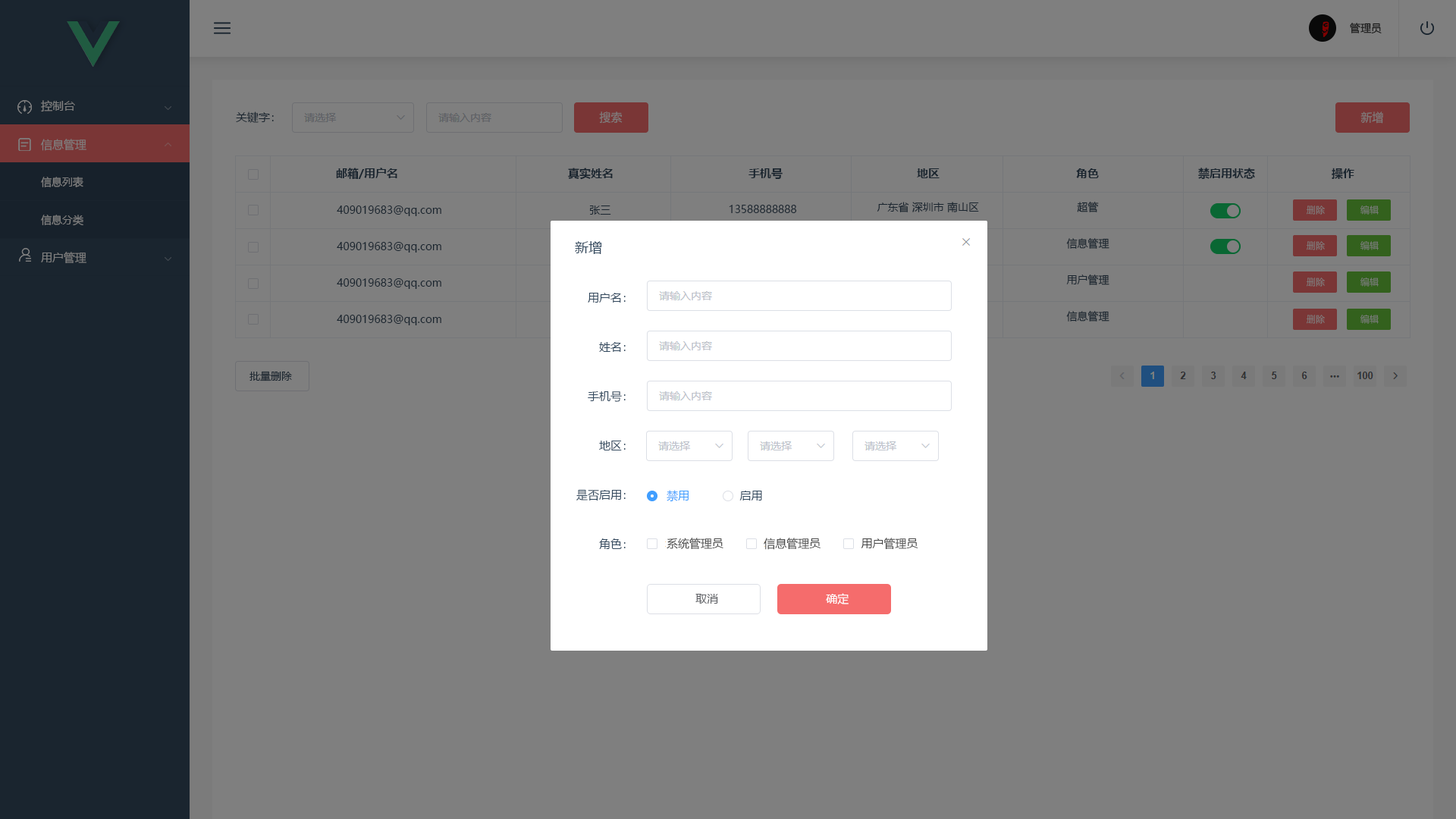
<style>
.page{position:relative;width:1456px;height:819px;background:#7f7f7f}
.page>*{position:absolute;margin:0}
.t1{font:10.6px "MicrosoftYaHei";color:#252525}
.t2{font:11.4px "MicrosoftYaHei";color:#7f7f7f}
.t3{font:11.4px "MicrosoftYaHei";color:#1a252f}
.t4{font:10.6px/37.9px "MicrosoftYaHei";color:#7f7f7f}
.t5{font:11.4px/37.9px "MicrosoftYaHei";color:#7f7f7f}
.t6{font:11.4px "MicrosoftYaHei-Bold";color:#1a252f}
.t7{font:10.6px/36.4px "MicrosoftYaHei";color:#1a252f}
.t8{font:9.1px "MicrosoftYaHei"}
.t9{font:13.6px "MicrosoftYaHei";color:#344a5f}
.t10{font:11.4px/49.3px "MicrosoftYaHei";color:#344a5f}
.t11{font:10.6px "MicrosoftYaHei";color:#1a252f}
.t12{font:11.4px "MicrosoftYaHei";color:#429fff}
.t13{font:11.4px "MicrosoftYaHei";color:#344a5f}
.t14{font:11.4px "MicrosoftYaHei";color:#484848}
.t15{font:11.4px "MicrosoftYaHei";color:#606266}
.t16{font:11.4px "MicrosoftYaHei";color:#ffffff}
</style>
<div class="page">
<p class="t1" style="left:1350px;top:23px;width:32px;height:11px">管理员</p>
<p class="t2" style="left:41px;top:100px;width:34px;height:12px">控制台</p>
<p class="t3" style="left:236px;top:111px;width:38px;height:12px">关键字：</p>
<p class="t2" style="left:599px;top:111px;width:24px;height:13px">搜索</p>
<p class="t2" style="left:1360px;top:111px;width:23px;height:13px">新增</p>
<p class="t4" style="left:41px;top:139px;width:45px;height:87px"><span class="t5">信息管理<br></span>信息列表<br>信息分类</p>
<p class="t6" style="left:336px;top:168px;width:61px;height:11px">邮箱/用户名</p>
<p class="t6" style="left:568px;top:168px;width:45px;height:12px">真实姓名</p>
<p class="t6" style="left:748px;top:168px;width:35px;height:11px">手机号</p>
<p class="t6" style="left:917px;top:168px;width:23px;height:10px">地区</p>
<p class="t6" style="left:1076px;top:168px;width:23px;height:10px">角色</p>
<p class="t6" style="left:1198px;top:168px;width:57px;height:11px">禁启用状态</p>
<p class="t6" style="left:1332px;top:168px;width:22px;height:11px">操作</p>
<p class="t7" style="left:337px;top:206px;width:104px;height:119px;text-align:center">409019683@qq.com<br>409019683@qq.com<br>409019683@qq.com<br>409019683@qq.com</p>
<p class="t7" style="left:1066px;top:202px;width:43px;height:120px;text-align:center">超管<br>信息管理<br>用户管理<br>信息管理</p>
<p class="t8" style="left:1307px;top:206px;width:18px;height:9px">删除</p>
<p class="t8" style="left:1360px;top:206px;width:19px;height:9px">编辑</p>
<p class="t9" style="left:575px;top:241px;width:27px;height:13px">新增</p>
<p class="t8" style="left:1307px;top:241px;width:18px;height:9px">删除</p>
<p class="t8" style="left:1360px;top:241px;width:19px;height:9px">编辑</p>
<p class="t2" style="left:41px;top:252px;width:45px;height:11px">用户管理</p>
<p class="t8" style="left:1307px;top:278px;width:18px;height:9px">删除</p>
<p class="t8" style="left:1360px;top:278px;width:19px;height:9px">编辑</p>
<p class="t10" style="left:576px;top:293px;width:50px;height:256px;text-align:right">用户名：<br>姓名：<br>手机号：<br>地区：<br>是否启用：<br>角色：</p>
<p class="t8" style="left:1307px;top:315px;width:18px;height:9px">删除</p>
<p class="t8" style="left:1360px;top:315px;width:19px;height:9px">编辑</p>
<p class="t11" style="left:249px;top:371px;width:43px;height:10px">批量删除</p>
<p class="t12" style="left:667px;top:490px;width:95px;height:12px">禁用<span class="t13">               启用</span></p>
<p class="t14" style="left:667px;top:538px;width:251px;height:12px">系统管理员            信息管理员            用户管理员</p>
<p class="t15" style="left:695px;top:594px;width:23px;height:10px">取消</p>
<p class="t16" style="left:826px;top:593px;width:23px;height:11px">确定</p>
</div>
